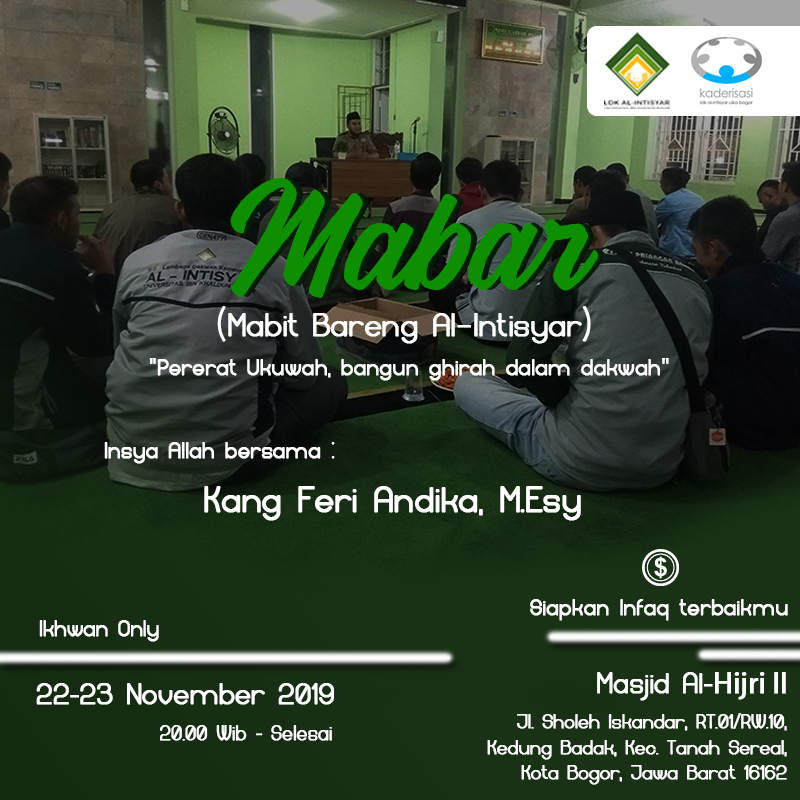
<style>
.page{position:relative;width:800px;height:800px}
.page>*{position:absolute;margin:0}
.t1{font:113.4px "Vigrand-Reg-Rough";letter-spacing:-0.02em;color:#0e8f01;font-weight:bold}
.t2{font:113.4px "Vigrand-Reg-Rough";letter-spacing:-0.02em;font-weight:bold}
.t3{font:33.9px "Available-Regular";letter-spacing:-0.02em;color:#fefefe;font-weight:bold}
.t4{font:33.9px "COCOGOOSE-UltraLight";letter-spacing:-0.02em;color:#fefefe;font-weight:bold}
.t5{font:24.5px "Available-Regular";letter-spacing:-0.02em;color:#ffffff;font-weight:bold}
.t6{font:24.5px "MyriadPro-Regular";letter-spacing:-0.02em;color:#ffffff;font-weight:bold}
.t7{font:38.2px "Available-Regular";letter-spacing:-0.02em;color:#ffffff;font-weight:bold}
.t8{font:24px "Available-Regular";letter-spacing:-0.02em;color:#ffffff;font-weight:bold}
.t9{font:30.1px "Available-Regular";letter-spacing:-0.02em;color:#ffffff;font-weight:bold}
.t10{font:30.1px "MyriadPro-Regular";letter-spacing:-0.02em;color:#ffffff;font-weight:bold}
.t11{font:31px "Available-Regular";letter-spacing:-0.02em;color:#ffffff;font-weight:bold}
.t12{font:31px "MyriadPro-Regular";letter-spacing:-0.02em;color:#ffffff;font-weight:bold}
.t13{font:21.3px "Available-Regular";letter-spacing:-0.02em;color:#ffffff;font-weight:bold}
.t14{font:21.3px "MyriadPro-Regular";letter-spacing:-0.02em;color:#ffffff;font-weight:bold}
.t15{font:21.9px "Available-Regular";letter-spacing:-0.02em;color:#ffffff;font-weight:bold}
.t16{font:21.9px "MyriadPro-Regular";letter-spacing:-0.02em;color:#ffffff;font-weight:bold}
</style>
<div class="page">
<p class="t1" style="left:230px;top:178px;width:369px;height:120px">Mabar</p>
<p class="t2" style="left:236px;top:178px;width:369px;height:120px">Mabar</p>
<p class="t3" style="left:217px;top:306px;width:374px;height:38px"><span class="t4">(</span>Mabit Bareng Al<span class="t4">-</span>Intisyar<span class="t4">)</span></p>
<p class="t5" style="left:149px;top:358px;width:520px;height:23px"><span class="t6">"</span>Pererat Ukuwah, bangun ghirah dalam dakwah<span class="t6">"</span></p>
<p class="t5" style="left:104px;top:442px;width:231px;height:22px">Insya Allah bersama :</p>
<p class="t7" style="left:204px;top:486px;width:377px;height:35px">Kang Feri Andika, M.Esy</p>
<p class="t5" style="left:530px;top:599px;width:258px;height:22px">Siapkan Infaq terbaikmu</p>
<p class="t8" style="left:39px;top:620px;width:120px;height:22px">Ikhwan Only</p>
<p class="t9" style="left:597px;top:672px;width:189px;height:29px">Masjid Al<span class="t10">-Hijri II</span></p>
<p class="t11" style="left:36px;top:683px;width:298px;height:22px">22<span class="t12">-</span>23 November 2019</p>
<p class="t13" style="left:487px;top:713px;width:300px;height:72px;text-align:right">Jl. Sholeh Iskandar, RT.01<span class="t14">/</span>RW.10,<br>Kedung Badak, Kec. Tanah Sereal,<br>Kota Bogor, Jawa Barat 16162</p>
<p class="t15" style="left:160px;top:725px;width:172px;height:16px">20.00 Wib <span class="t16">-</span> Selesai</p>
</div>
